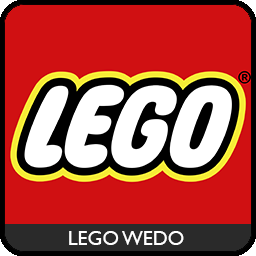
<style>
.page{position:relative;width:256px;height:256px;background:#d01012}
.page>*{position:absolute;margin:0}
.t1{font:20px "GillSansMT";color:#ffffff}
</style>
<div class="page">
<p class="t1" style="left:69px;top:231px;width:115px;height:14px">LEGO WEDO</p>
</div>
